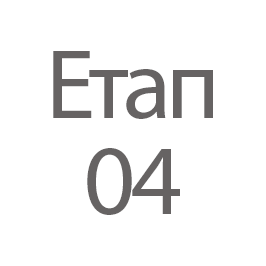
<style>
.page{position:relative;width:266px;height:266px;background:#ffffff}
.page>*{position:absolute;margin:0}
.t1{font:100px/31.8px "MyriadPro-Regular";letter-spacing:-0.05em;color:#666363}
</style>
<div class="page">
<p class="t1" style="left:53px;top:51px;width:160px;height:164px;text-align:center">Етап<br><br><br>04</p>
</div>
